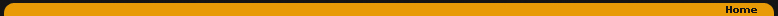
<style>
.page{position:relative;width:778px;height:16px;background:#e89a06}
.page>*{position:absolute;margin:0}
.t1{font:10px "Verdana-Bold";color:#141414}
</style>
<div class="page">
<p class="t1" style="left:726px;top:6px;width:31px;height:7px">Home</p>
</div>
